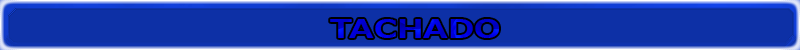
<style>
.page{position:relative;width:800px;height:50px;background:#0d30a6}
.page>*{position:absolute;margin:0}
.t1{font:26.2px "Meiryo-Bold";scale:1.27 1}
</style>
<div class="page">
<p class="t1" style="left:330px;top:19px;width:169px;height:19px">TACHADO</p>
</div>
